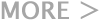
<style>
.page{position:relative;width:100px;height:20px;background:#ffffff}
.page>*{position:absolute;margin:0}
.t1{font:24px "LucidaSansUnicode";color:#a6a6a6;font-weight:bold}
.t2{font:30px "LucidaSansUnicode";color:#a6a6a6;font-weight:bold}
</style>
<div class="page">
<p class="t1" style="left:1px;top:1px;width:98px;height:19px">MORE <span class="t2">&gt;</span></p>
</div>
